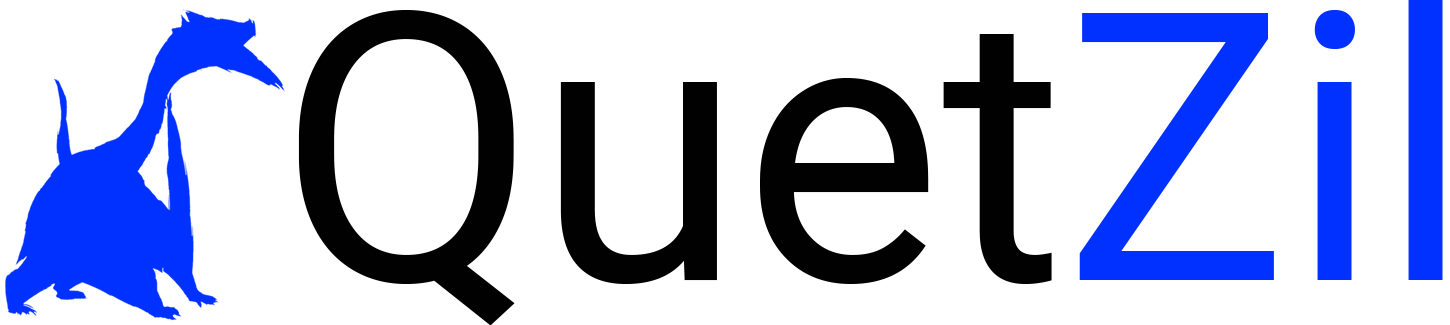
<style>
.page{position:relative;width:1450px;height:325px;background:#ffffff}
.page>*{position:absolute;margin:0}
.t1{font:375px "Roboto-Regular";color:#010101}
.t2{font:375px "Roboto-Regular";color:#0031ff}
</style>
<div class="page">
<p class="t1" style="left:298px;top:0px;width:1145px;height:326px">Quet<span class="t2">Zil</span></p>
</div>
